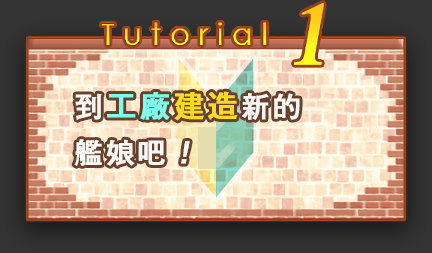
<style>
.page{position:relative;width:432px;height:253px}
.page>*{position:absolute;margin:0}
.t1{font:28px/48px "GothicMB101Pr6N-Medium";letter-spacing:0.1em;color:#fff9f5;font-weight:bold}
.t2{font:30px/48px "GothicMB101Pr6N-Medium";letter-spacing:0.1em;color:#7dffea;font-weight:bold}
.t3{font:30px/48px "GothicMB101Pr6N-Medium";letter-spacing:0.1em;color:#ffd926;font-weight:bold}
.t4{font:28px/48px "GothicMB101Pr6N-Medium";letter-spacing:0.1em;color:#fff9f5;font-weight:bold;font-style:italic}
</style>
<div class="page">
<p class="t1" style="left:74px;top:91px;width:226px;height:75px">到<span class="t2">工廠</span><span class="t3">建造</span>新的<br>艦娘吧<span class="t4">！</span></p>
</div>
